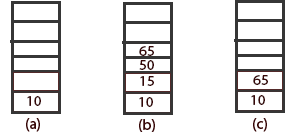
<style>
.page{position:relative;width:305px;height:132px;background:#ffffff}
.page>*{position:absolute;margin:0}
.t1{font:15px "MyriadHebrew-Regular";color:#360707}
</style>
<div class="page">
<p class="t1" style="left:139px;top:46px;width:15px;height:10px">65</p>
<p class="t1" style="left:139px;top:60px;width:15px;height:10px">50</p>
<p class="t1" style="left:140px;top:76px;width:14px;height:10px">15</p>
<p class="t1" style="left:253px;top:75px;width:15px;height:10px">65</p>
<p class="t1" style="left:27px;top:96px;width:14px;height:10px">10</p>
<p class="t1" style="left:139px;top:97px;width:14px;height:10px">10</p>
<p class="t1" style="left:251px;top:95px;width:14px;height:10px">10</p>
<p class="t1" style="left:26px;top:118px;width:14px;height:14px">(a)</p>
<p class="t1" style="left:139px;top:119px;width:16px;height:14px">(b)</p>
<p class="t1" style="left:253px;top:118px;width:14px;height:14px">(c)</p>
</div>
